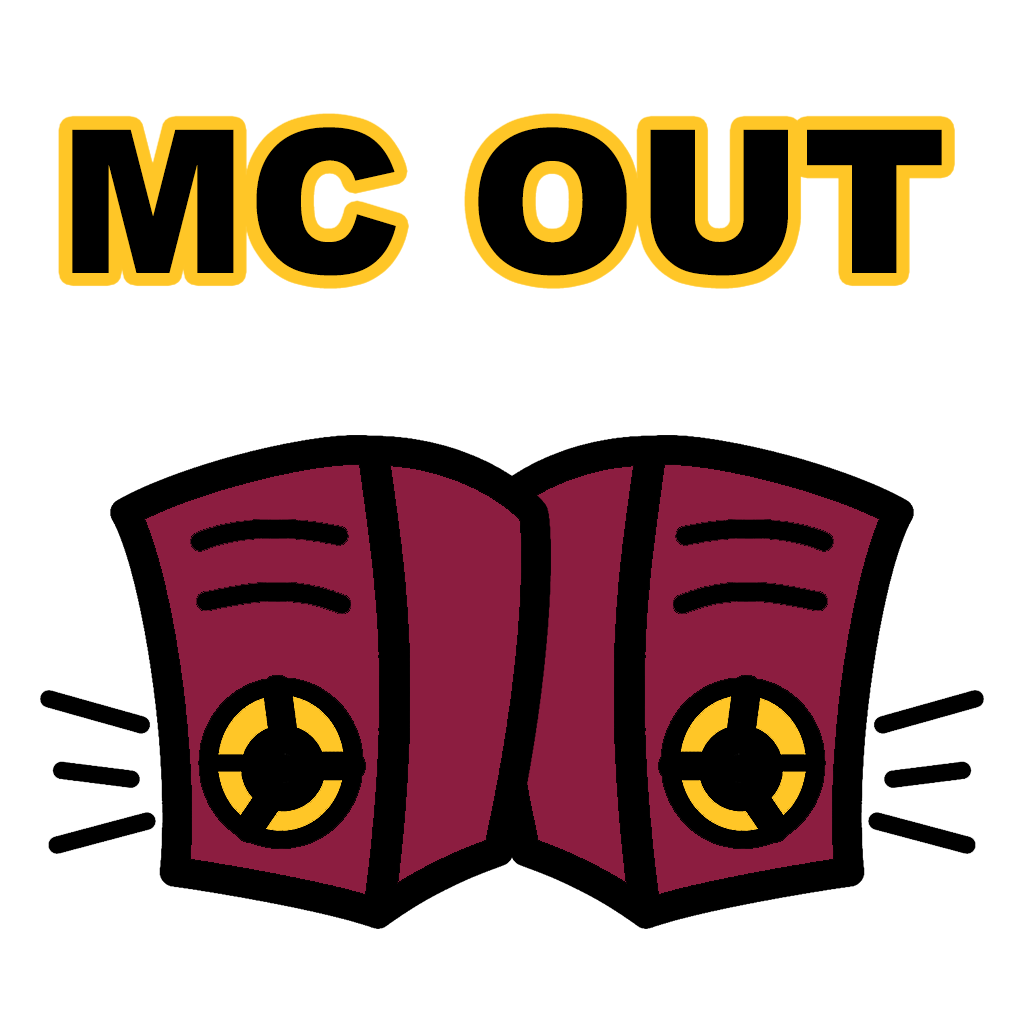
<style>
.page{position:relative;width:1024px;height:1024px;background:#ffffff}
.page>*{position:absolute;margin:0}
.t1{font:200px "Arial-Black";color:#000000}
</style>
<div class="page">
<p class="t1" style="left:72px;top:127px;width:870px;height:149px">MC OUT</p>
</div>
